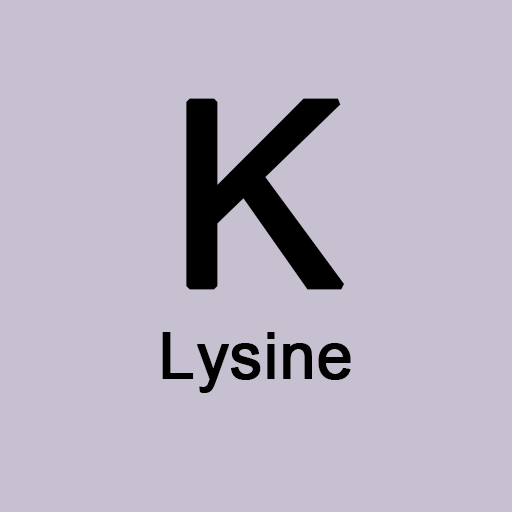
<style>
.page{position:relative;width:512px;height:512px;background:#c7c0d0}
.page>*{position:absolute;margin:0}
.t1{font:256px "ArialMT";color:#000000;font-weight:bold}
.t2{font:64px "ArialMT";color:#000000;font-weight:bold}
</style>
<div class="page">
<p class="t1" style="left:186px;top:98px;width:159px;height:192px">K</p>
<p class="t2" style="left:162px;top:332px;width:189px;height:61px">Lysine</p>
</div>
